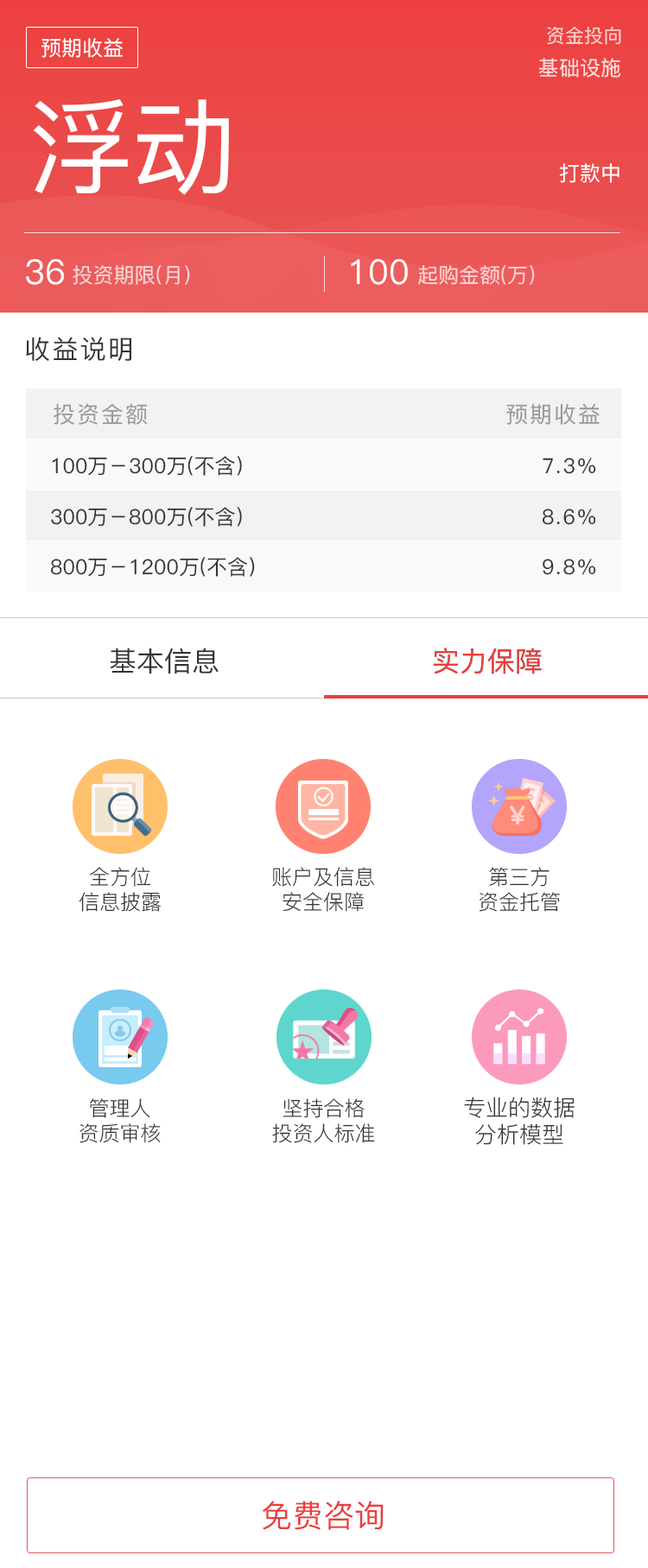
<style>
.page{position:relative;width:648px;height:1568px;background:#ffffff}
.page>*{position:absolute;margin:0}
.t1{font:19px "PingFang-SC-Medium";color:#f9d3d3}
.t2{font:20.7px "PingFang-SC-Medium";color:#ffffff}
.t3{font:20.7px "PingFang-SC-Medium";color:#fbe2e2}
.t4{font:103.6px "PingFang-SC-Medium";color:#ffffff}
.t5{font:34.3px "PingFang-SC-Medium";color:#ffffff}
.t6{font:20.7px "PingFang-SC-Medium";color:#f9d7d7}
.t7{font:25.9px "PingFang-SC-Medium";letter-spacing:0.075em;color:#333333}
.t8{font:22.4px "PingFang-SC-Medium";letter-spacing:0.075em;color:#999999}
.t9{font:20.7px "PingFang-SC-Medium";color:#333333}
.t10{font:20.7px "PingFang-SC-Medium";letter-spacing:0.075em;color:#333333}
.t11{font:27.6px "PingFang-SC-Medium";color:#333333}
.t12{font:27.6px "PingFang-SC-Medium";color:#ed3e3e}
.t13{font:20.7px "PingFang-SC-Regular";color:#333333}
.t14{font:22.5px "PingFang-SC-Regular";color:#333333}
.t15{font:31.1px "PingFang-SC-Medium";color:#ed3e3e}
</style>
<div class="page">
<p class="t1" style="left:547px;top:26px;width:74px;height:19px">资金投向</p>
<p class="t2" style="left:41px;top:38px;width:82px;height:20px">预期收益</p>
<p class="t3" style="left:538px;top:58px;width:83px;height:20px">基础设施</p>
<p class="t4" style="left:33px;top:99px;width:196px;height:96px">浮动</p>
<p class="t2" style="left:559px;top:163px;width:60px;height:20px">打款中</p>
<p class="t5" style="left:26px;top:259px;width:38px;height:26px">36</p>
<p class="t6" style="left:73px;top:265px;width:117px;height:20px">投资期限(月）</p>
<p class="t5" style="left:351px;top:259px;width:57px;height:26px">100</p>
<p class="t6" style="left:418px;top:265px;width:116px;height:20px">起购金额(万）</p>
<p class="t7" style="left:26px;top:337px;width:105px;height:24px">收益说明</p>
<p class="t8" style="left:54px;top:403px;width:94px;height:22px">投资金额</p>
<p class="t8" style="left:506px;top:403px;width:93px;height:22px">预期收益</p>
<p class="t9" style="left:52px;top:456px;width:190px;height:20px">100万－300万(不含）</p>
<p class="t10" style="left:542px;top:458px;width:54px;height:16px">7.3%</p>
<p class="t9" style="left:51px;top:507px;width:191px;height:20px">300万－800万(不含）</p>
<p class="t10" style="left:541px;top:509px;width:55px;height:16px">8.6%</p>
<p class="t9" style="left:50px;top:557px;width:205px;height:20px">800万－1200万(不含）</p>
<p class="t10" style="left:542px;top:559px;width:54px;height:16px">9.8%</p>
<p class="t11" style="left:110px;top:648px;width:108px;height:26px">基本信息</p>
<p class="t12" style="left:433px;top:648px;width:108px;height:26px">实力保障</p>
<p class="t12" style="left:433px;top:648px;width:108px;height:26px">实力保障</p>
<p class="t13" style="left:79px;top:867px;width:82px;height:45px;text-align:center">全方位<br>信息披露</p>
<p class="t13" style="left:272px;top:867px;width:102px;height:45px;text-align:center">账户及信息<br>安全保障</p>
<p class="t13" style="left:478px;top:867px;width:82px;height:45px;text-align:center">第三方<br>资金托管</p>
<p class="t14" style="left:464px;top:1097px;width:110px;height:48px;text-align:center">专业的数据<br>分析模型</p>
<p class="t13" style="left:79px;top:1098px;width:82px;height:45px;text-align:center">管理人<br>资质审核</p>
<p class="t13" style="left:272px;top:1098px;width:103px;height:45px;text-align:center">坚持合格<br>投资人标准</p>
<p class="t15" style="left:262px;top:1501px;width:121px;height:29px">免费咨询</p>
</div>
